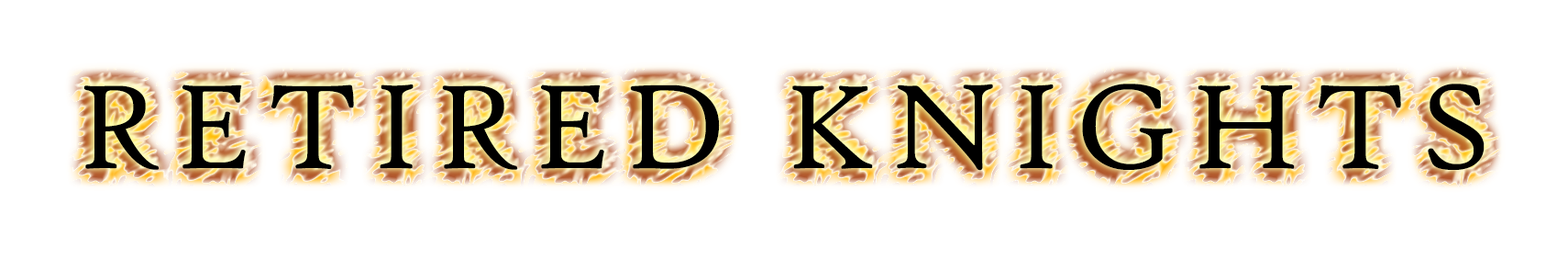
<style>
.page{position:relative;width:1568px;height:259px;background:#ffffff}
.page>*{position:absolute;margin:0}
.t1{font:128.4px "HighTowerText-Reg";letter-spacing:0.1em;color:#000000}
</style>
<div class="page">
<p class="t1" style="left:83px;top:83px;width:1402px;height:88px">RETIRED KNIGHTS</p>
</div>
